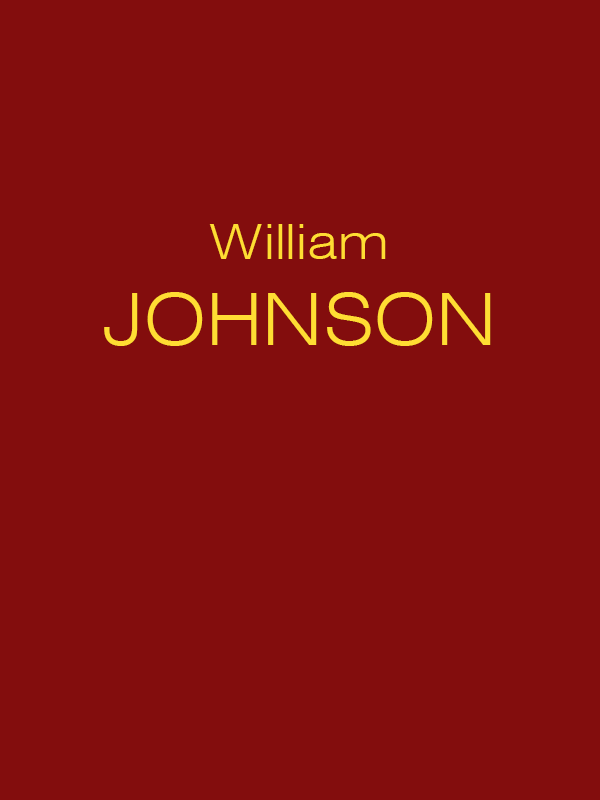
<style>
.page{position:relative;width:600px;height:800px;background:#830d0d}
.page>*{position:absolute;margin:0}
.t1{font:48px "Swiss721BT-LightExtended";color:#ffdd33}
.t2{font:72px "Swiss721BT-LightExtended";color:#ffdd33}
</style>
<div class="page">
<p class="t1" style="left:104px;top:224px;width:387px;height:122px;text-align:center">William<br><span class="t2">JOHNSON</span></p>
</div>
